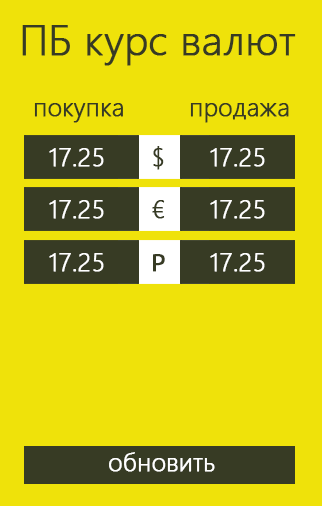
<style>
.page{position:relative;width:322px;height:506px;background:#efe20a}
.page>*{position:absolute;margin:0}
.t1{font:41.7px "YuGothicUI-Light";color:#373b24;font-weight:bold}
.t2{font:25px "YuGothicUI-Light";color:#373b24;font-weight:bold}
.t3{font:25px "YuGothicUI-Light";color:#ffffff;font-weight:bold}
.t4{font:25px "MyriadPro-Regular";color:#373b24;font-weight:bold}
</style>
<div class="page">
<p class="t1" style="left:22px;top:25px;width:274px;height:41px">ПБ курс валют</p>
<p class="t2" style="left:34px;top:103px;width:89px;height:20px">покупка</p>
<p class="t2" style="left:190px;top:103px;width:99px;height:20px">продажа</p>
<p class="t3" style="left:49px;top:148px;width:55px;height:19px">17.25</p>
<p class="t2" style="left:153px;top:146px;width:11px;height:24px">$</p>
<p class="t3" style="left:210px;top:148px;width:55px;height:19px">17.25</p>
<p class="t3" style="left:49px;top:200px;width:55px;height:19px">17.25</p>
<p class="t2" style="left:152px;top:200px;width:13px;height:19px">€</p>
<p class="t3" style="left:210px;top:200px;width:55px;height:19px">17.25</p>
<p class="t3" style="left:49px;top:253px;width:55px;height:19px">17.25</p>
<p class="t4" style="left:153px;top:254px;width:12px;height:18px">Р</p>
<p class="t3" style="left:210px;top:253px;width:55px;height:19px">17.25</p>
<p class="t3" style="left:109px;top:452px;width:106px;height:20px">обновить</p>
</div>
